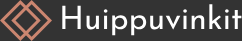
<style>
.page{position:relative;width:242px;height:41px;background:#333333}
.page>*{position:absolute;margin:0}
.t1{font:32px "JosefinSans-Regular";color:#ffffff}
</style>
<div class="page">
<p class="t1" style="left:62px;top:4px;width:180px;height:32px">Huippuvinkit</p>
</div>
